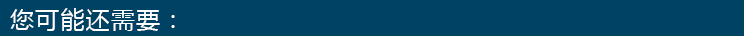
<style>
.page{position:relative;width:744px;height:37px;background:#004263}
.page>*{position:absolute;margin:0}
.t1{font:24px "MicrosoftYaHei";letter-spacing:0.05em;color:#ffffff}
</style>
<div class="page">
<p class="t1" style="left:10px;top:8px;width:165px;height:23px">您可能还需要：</p>
</div>
